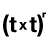
<style>
.page{position:relative;width:48px;height:48px;background:#ffffff}
.page>*{position:absolute;margin:0}
.t1{font:24.1px "HelveticaNeueLTPro-Bd";color:#000000}
.t2{font:22.1px "HelveticaNeueLTPro-Bd";letter-spacing:0.1em;color:#000000}
.t3{font:15.1px "HelveticaNeueLTPro-Bd";letter-spacing:0.14em;color:#000000}
.t4{font:22.1px "HelveticaNeueLTPro-Bd";color:#000000}
.t5{font:24.1px "HelveticaNeueLTPro-Bd";letter-spacing:-0.08em;color:#000000}
.t6{font:9.6px "HelveticaNeueLTPro-Hv";color:#000000}
</style>
<div class="page">
<p class="t1" style="left:3px;top:12px;width:43px;height:25px">(<span class="t2">t</span><span class="t3">x</span><span class="t4">t</span><span class="t5">)</span><span class="t6">r</span></p>
</div>
